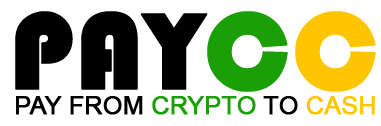
<style>
.page{position:relative;width:381px;height:126px;background:#ffffff}
.page>*{position:absolute;margin:0}
.t1{font:112.7px "Bauhaus93";color:#000000;font-weight:bold}
.t2{font:112.7px "Bauhaus93";color:#1b9f06;font-weight:bold}
.t3{font:112.7px "Bauhaus93";color:#ffc600;font-weight:bold}
.t4{font:24.5px "ArialMT";color:#000000;font-weight:bold}
.t5{font:24.5px "ArialMT";color:#1b9f06;font-weight:bold}
.t6{font:24.5px "ArialMT";color:#ffc600;font-weight:bold}
</style>
<div class="page">
<p class="t1" style="left:15px;top:11px;width:361px;height:81px">PAY<span class="t2">C</span><span class="t3">C</span></p>
<p class="t4" style="left:16px;top:96px;width:359px;height:19px">PAY FROM <span class="t5">CRYPTO</span> TO <span class="t6">CASH</span></p>
</div>
